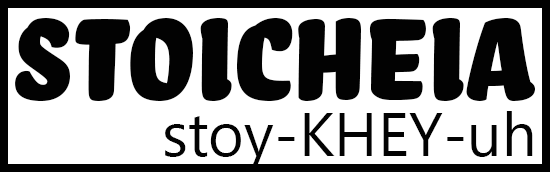
<style>
.page{position:relative;width:550px;height:172px;background:#ffffff}
.page>*{position:absolute;margin:0}
.t1{font:149.9px "BelloCapsPro-Regular";color:#020202}
.t2{font:61.4px "SegoeUIHistoric";color:#020202}
</style>
<div class="page">
<p class="t1" style="left:15px;top:18px;width:520px;height:83px">Stoicheia</p>
<p class="t2" style="left:165px;top:111px;width:368px;height:60px">stoy-KHEY-uh</p>
</div>
